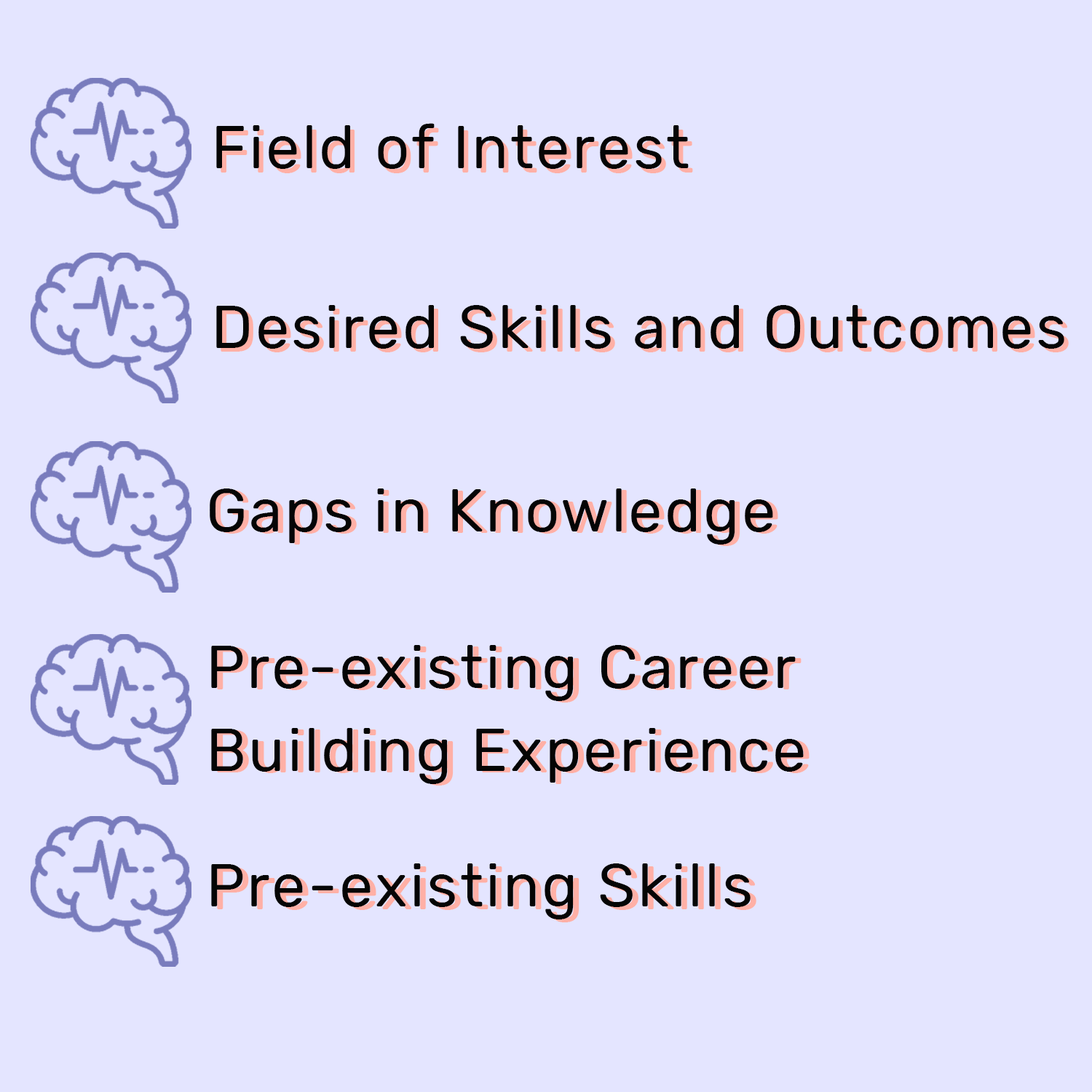
<style>
.page{position:relative;width:1092px;height:1092px;background:#e4e5ff}
.page>*{position:absolute;margin:0}
.t1{font:60.6px "Rubik-Regular";letter-spacing:0.04em;color:#050505}
.t2{font:60.6px "Rubik-Regular";letter-spacing:0.04em;color:#ffb0a6}
.t3{font:60.6px/75.7px "Rubik-Regular";letter-spacing:0.04em;color:#050505}
.t4{font:60.6px/75.7px "Rubik-Regular";letter-spacing:0.04em;color:#ffb0a6}
</style>
<div class="page">
<p class="t1" style="left:216px;top:123px;width:473px;height:46px">Field of Interest</p>
<p class="t1" style="left:216px;top:305px;width:848px;height:44px">Desired Skills and Outcomes</p>
<p class="t1" style="left:210px;top:488px;width:563px;height:57px">Gaps in Knowledge</p>
<p class="t2" style="left:215px;top:490px;width:563px;height:56px">Gaps in Knowledge</p>
<p class="t3" style="left:211px;top:645px;width:593px;height:139px">Pre-existing Career <br>Building Experience</p>
<p class="t4" style="left:217px;top:646px;width:593px;height:140px">Pre-existing Career <br>Building Experience</p>
<p class="t1" style="left:211px;top:863px;width:540px;height:56px">Pre-existing Skills</p>
<p class="t2" style="left:217px;top:866px;width:539px;height:56px">Pre-existing Skills</p>
</div>
